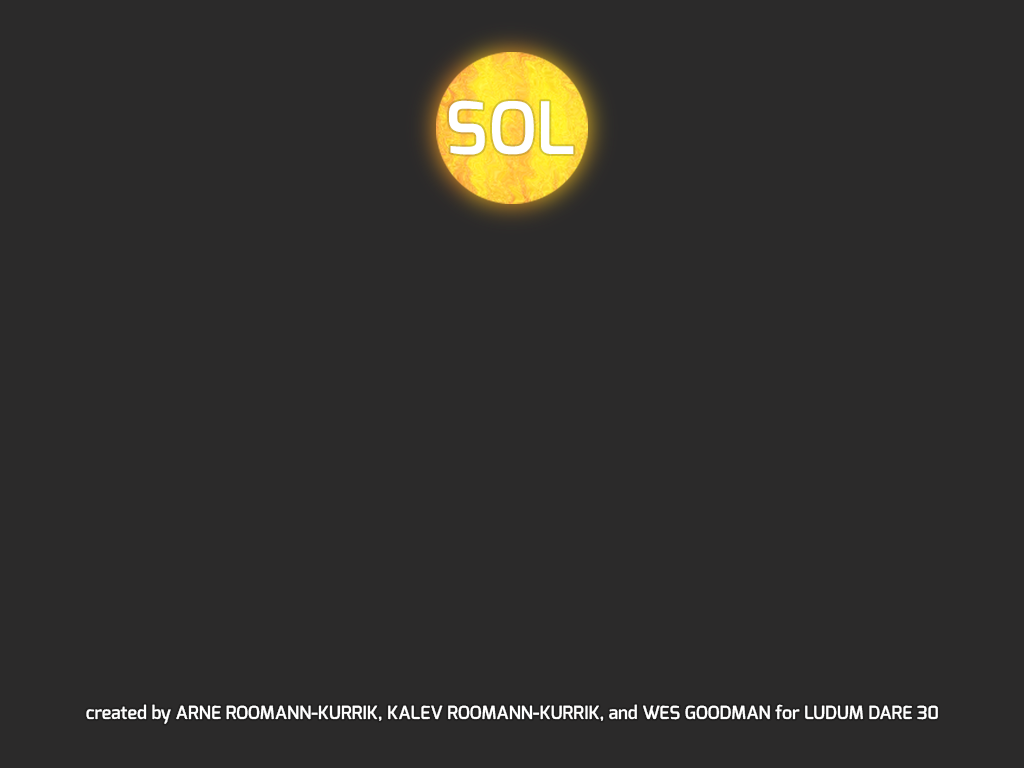
<style>
.page{position:relative;width:1024px;height:768px;background:#2b2a2a}
.page>*{position:absolute;margin:0}
.t1{font:72px "Exo-DemiBold";color:#ffffff}
.t2{font:18px "Exo-DemiBold";color:#ffffff}
</style>
<div class="page">
<p class="t1" style="left:449px;top:100px;width:125px;height:55px">SOL</p>
<p class="t2" style="left:86px;top:704px;width:852px;height:20px">created by ARNE ROOMANN-KURRIK, KALEV ROOMANN-KURRIK, and WES GOODMAN for LUDUM DARE 30</p>
</div>
